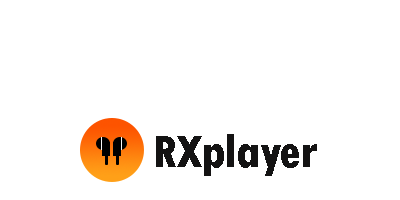
<style>
.page{position:relative;width:400px;height:200px;background:#ffffff}
.page>*{position:absolute;margin:0}
.t1{font:48px "TwCenMT-CondensedExtraBold";color:#141313}
</style>
<div class="page">
<p class="t1" style="left:156px;top:134px;width:161px;height:42px">RXplayer</p>
</div>
